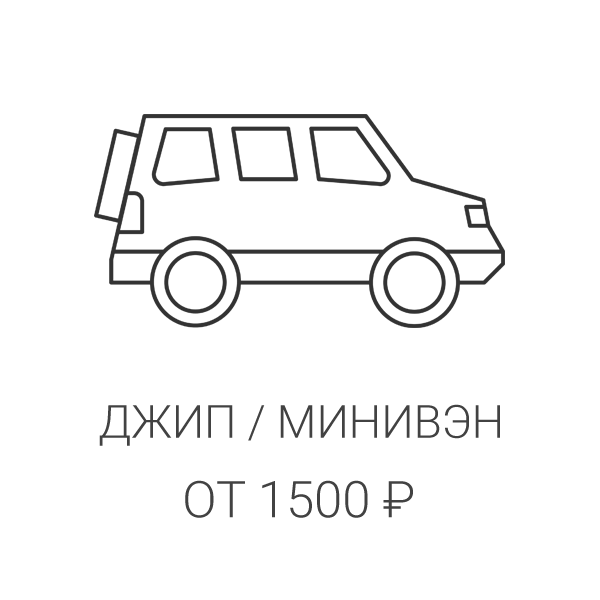
<style>
.page{position:relative;width:600px;height:600px;background:#ffffff}
.page>*{position:absolute;margin:0}
.t1{font:45.7px "Roboto-Light";color:#424242}
.t2{font:50.8px "Roboto-Light";color:#424242}
</style>
<div class="page">
<p class="t1" style="left:99px;top:404px;width:401px;height:42px">ДЖИП / МИНИВЭН</p>
<p class="t2" style="left:185px;top:480px;width:228px;height:38px">ОТ 1500 ₽</p>
</div>
